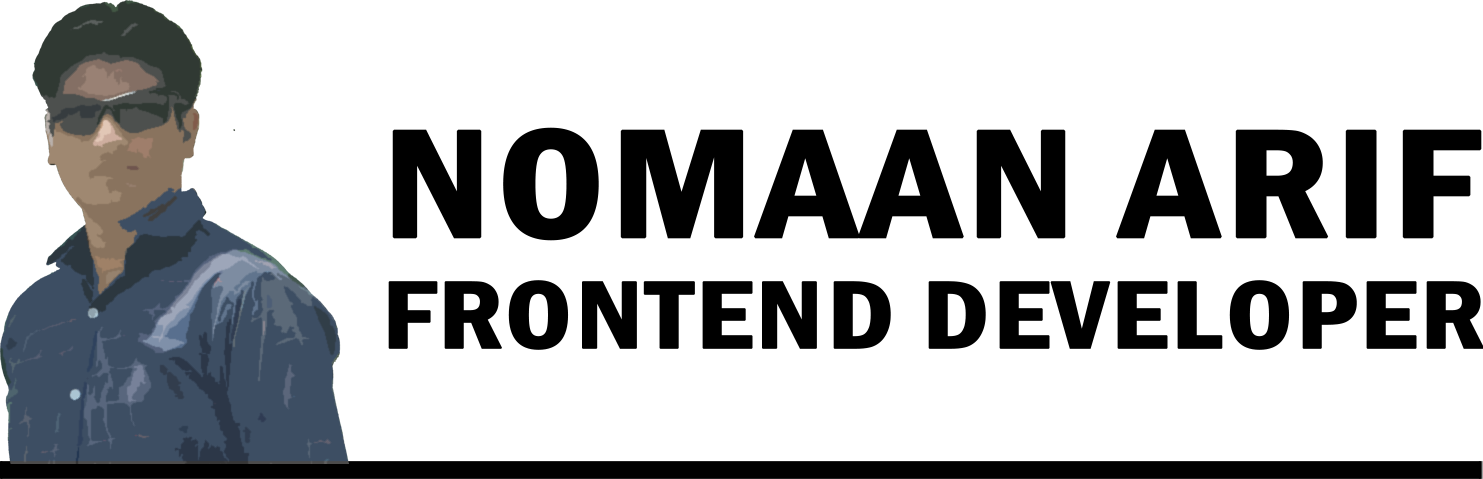
<style>
.page{position:relative;width:1483px;height:479px;background:#ffffff}
.page>*{position:absolute;margin:0}
.t1{font:159.3px "FranklinGothic-DemiCond";color:#000000;text-transform:uppercase;font-weight:bold;scale:1.21 1}
.t2{font:98.8px "FranklinGothic-DemiCond";color:#000000;text-transform:uppercase;font-weight:bold;scale:1.21 1}
</style>
<div class="page">
<p class="t1" style="left:392px;top:127px;width:1090px;height:114px">NOMAAN ARIF</p>
<p class="t2" style="left:388px;top:280px;width:1096px;height:70px">FRONTEND DEVELOPER</p>
</div>
